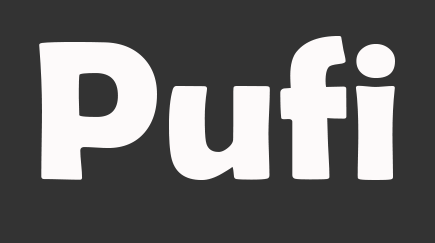
<style>
.page{position:relative;width:435px;height:243px;background:#333333}
.page>*{position:absolute;margin:0}
.t1{font:200px "BerlinSansFBDemi-Bold";color:#fdfafa}
</style>
<div class="page">
<p class="t1" style="left:39px;top:36px;width:356px;height:144px">Pufi</p>
</div>
